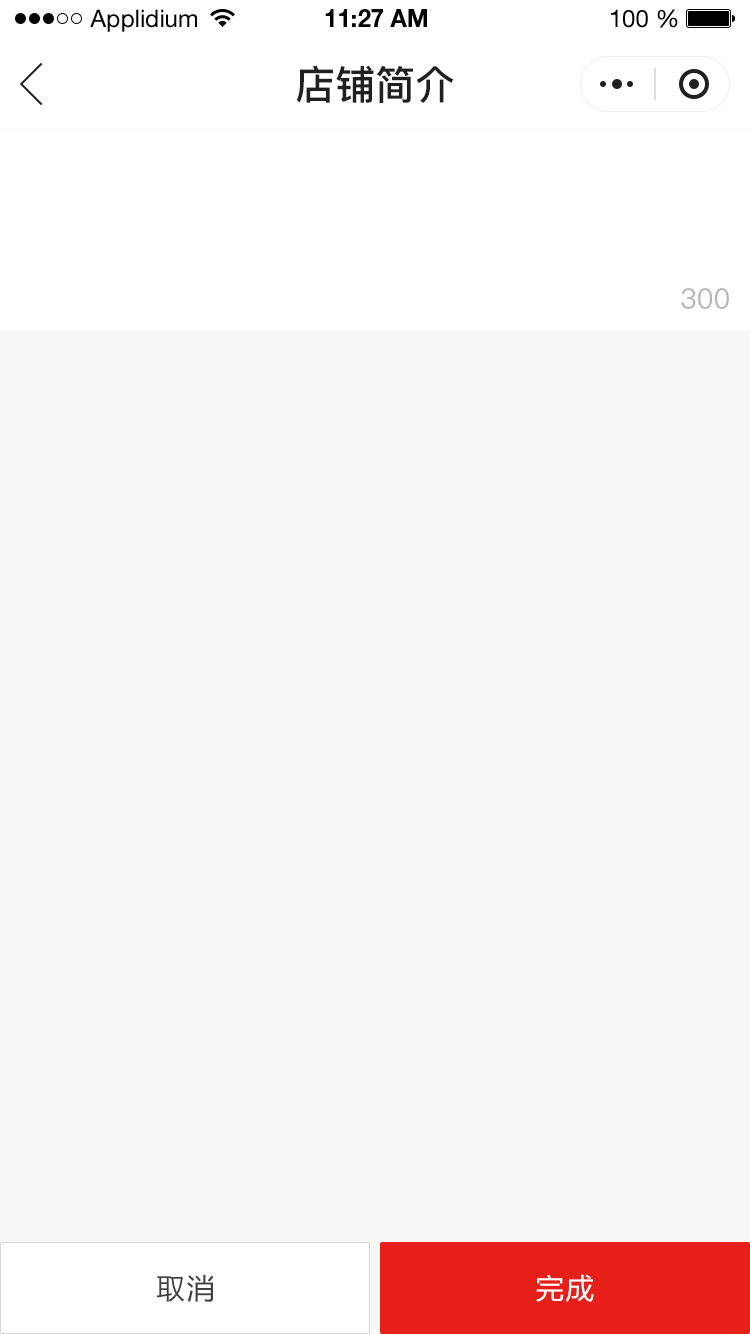
<style>
.page{position:relative;width:750px;height:1334px;background:#f7f7f7}
.page>*{position:absolute;margin:0}
.t1{font:24px "HelveticaNeueLTStd-Roman";color:#000000}
.t2{font:24px "HelveticaNeueLTStd-Bd";color:#000000}
.t3{font:40px "PingFang-SC-Bold";color:#202020;text-transform:uppercase}
.t4{font:28px "PingFang-SC-Medium";color:#b6b6b6;text-transform:uppercase}
.t5{font:28px "MicrosoftYaHei";letter-spacing:0.08em;color:#404040}
.t6{font:28px "MicrosoftYaHei";letter-spacing:0.08em;color:#ffffff}
</style>
<div class="page">
<p class="t1" style="left:90px;top:9px;width:107px;height:23px">Applidium</p>
<p class="t2" style="left:325px;top:9px;width:102px;height:18px">11:27 AM</p>
<p class="t1" style="left:611px;top:9px;width:67px;height:19px">100 %</p>
<p class="t3" style="left:296px;top:65px;width:158px;height:38px">店铺简介</p>
<p class="t4" style="left:681px;top:288px;width:48px;height:21px">300</p>
<p class="t5" style="left:156px;top:1274px;width:58px;height:28px">取消</p>
<p class="t6" style="left:536px;top:1274px;width:58px;height:28px">完成</p>
</div>
